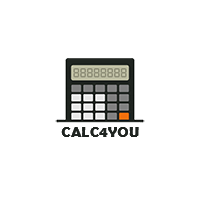
<style>
.page{position:relative;width:200px;height:200px;background:#ffffff}
.page>*{position:absolute;margin:0}
.t1{font:15.3px "BerlinSansFBDemi-Bold";color:#1f2420;text-transform:uppercase}
</style>
<div class="page">
<p class="t1" style="left:61px;top:127px;width:78px;height:10px">CALC4YOU</p>
</div>
